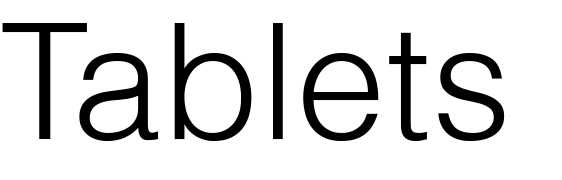
<style>
.page{position:relative;width:562px;height:180px;background:#ffffff}
.page>*{position:absolute;margin:0}
.t1{font:161.3px "Helvetica-Light";color:#000000}
</style>
<div class="page">
<p class="t1" style="left:2px;top:23px;width:503px;height:118px">Tablets</p>
</div>
